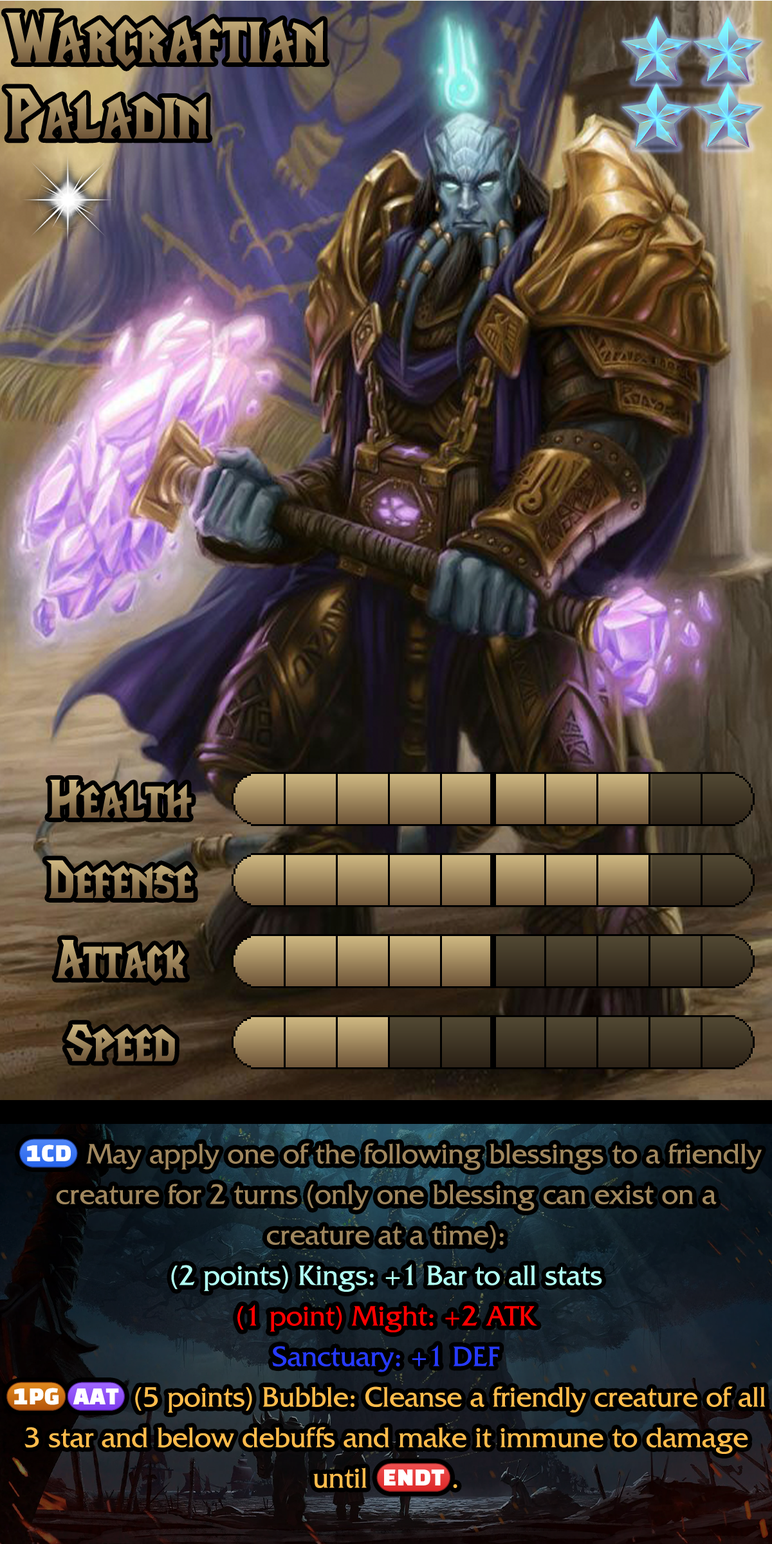
<style>
.page{position:relative;width:772px;height:1544px}
.page>*{position:absolute;margin:0}
.t1{font:121.6px "LifeCraft"}
.t2{font:92.7px "LifeCraft"}
.t3{font:50.2px/40.5px "FrizQuadrataStd";color:#a0875e}
.t4{font:50.2px/40.5px "stoogedings-Regular";color:#a0875e}
.t5{font:50.2px/40.5px "FrizQuadrataStd";color:#b0fff3}
.t6{font:50.2px/40.5px "FrizQuadrataStd";color:#ff0000}
.t7{font:50.2px/40.5px "FrizQuadrataStd";color:#263aff}
.t8{font:50.2px/40.5px "stoogedings-Regular";color:#ffbb4b}
.t9{font:50.2px/40.5px "stoogedings-Regular";letter-spacing:0.28em;color:#ffbb4b}
.t10{font:50.2px/40.5px "FrizQuadrataStd";color:#ffbb4b}
</style>
<div class="page">
<p class="t1" style="left:5px;top:12px;width:321px;height:55px">Warcraftian</p>
<p class="t1" style="left:6px;top:88px;width:202px;height:51px">Paladin</p>
<p class="t2" style="left:49px;top:780px;width:143px;height:38px">Health</p>
<p class="t2" style="left:46px;top:860px;width:148px;height:39px">Defense</p>
<p class="t2" style="left:56px;top:939px;width:130px;height:43px">Attack</p>
<p class="t2" style="left:66px;top:1024px;width:109px;height:38px">Speed</p>
<p class="t3" style="left:6px;top:1139px;width:760px;height:353px;text-align:center"><span class="t4">(1CD)</span> May apply one of the following blessings to a friendly creature for 2 turns (only one blessing can exist on a creature at a time):<br><span class="t5">(2 points) Kings: +1 Bar to all stats<br></span><span class="t6">(1 point) Might: +2 ATK<br></span><span class="t7">Sanctuary: +1 DEF<br></span><span class="t8">(1PG)</span><span class="t9">(AAT)</span><span class="t10">(5 points) Bubble: Cleanse a friendly creature of all 3 star and below debuffs and make it immune to damage until </span><span class="t8">(ENDT)</span><span class="t10">.</span></p>
</div>
